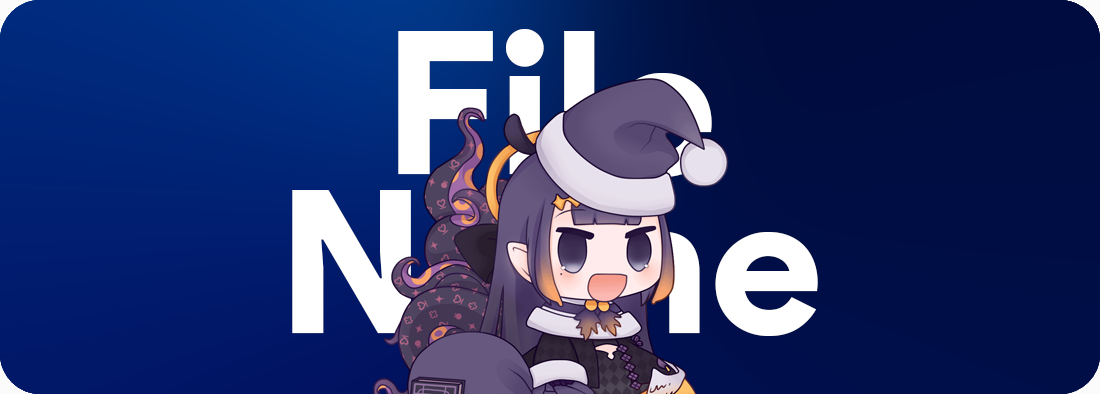
<style>
.page{position:relative;width:1100px;height:394px}
.page>*{position:absolute;margin:0}
.t1{font:200px/158.3px "ProductSans-Black";color:#ffffff}
</style>
<div class="page">
<p class="t1" style="left:292px;top:29px;width:526px;height:307px;text-align:center">File<br>Name</p>
</div>
